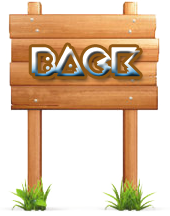
<style>
.page{position:relative;width:170px;height:216px;background:#ffffff}
.page>*{position:absolute;margin:0}
.t1{font:33.3px "CrackMan";font-weight:bold}
</style>
<div class="page">
<p class="t1" style="left:31px;top:45px;width:109px;height:32px">back</p>
</div>
